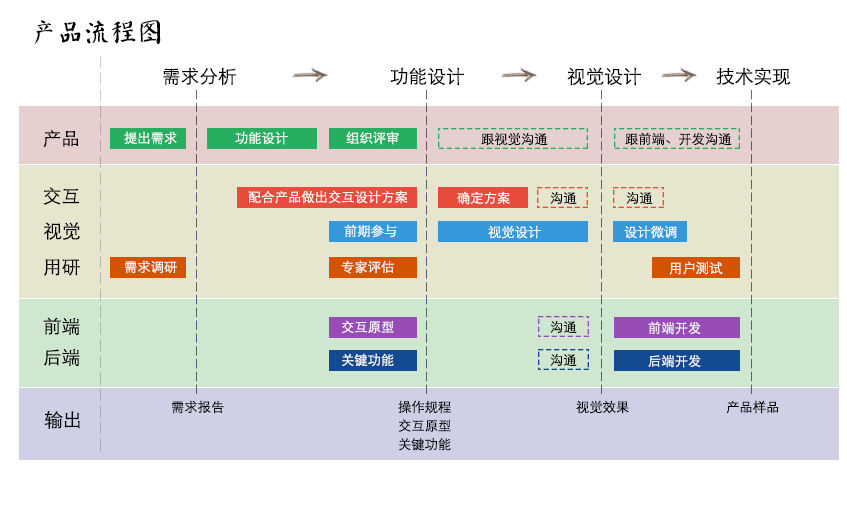
<style>
.page{position:relative;width:847px;height:513px;background:#ffffff}
.page>*{position:absolute;margin:0}
.t1{font:26.7px "øów·»îów©I";color:#000000;text-transform:uppercase}
.t2{font:18.7px "STXihei";color:#000000;text-transform:uppercase}
.t3{font:13.3px "STXihei";color:#ffffff;text-transform:uppercase}
.t4{font:13.3px "STXihei";color:#000000;text-transform:uppercase}
.t5{font:13.3px/18.7px "STXihei";color:#000000;text-transform:uppercase}
</style>
<div class="page">
<p class="t1" style="left:34px;top:20px;width:127px;height:25px">产品流程图</p>
<p class="t2" style="left:163px;top:67px;width:73px;height:18px">需求分析</p>
<p class="t2" style="left:390px;top:67px;width:74px;height:19px">功能设计</p>
<p class="t2" style="left:567px;top:67px;width:74px;height:19px">视觉设计</p>
<p class="t2" style="left:716px;top:67px;width:75px;height:19px">技术实现</p>
<p class="t2" style="left:43px;top:130px;width:35px;height:17px">产品</p>
<p class="t3" style="left:124px;top:131px;width:53px;height:14px">提出需求</p>
<p class="t3" style="left:235px;top:131px;width:53px;height:14px">功能设计</p>
<p class="t3" style="left:346px;top:131px;width:53px;height:14px">组织评审</p>
<p class="t4" style="left:481px;top:132px;width:67px;height:14px">跟视觉沟通</p>
<p class="t4" style="left:625px;top:132px;width:107px;height:14px">跟前端、开发沟通</p>
<p class="t2" style="left:43px;top:187px;width:36px;height:18px">交互</p>
<p class="t3" style="left:248px;top:190px;width:160px;height:14px">配合产品做出交互设计方案</p>
<p class="t3" style="left:457px;top:191px;width:53px;height:14px">确定方案</p>
<p class="t4" style="left:550px;top:192px;width:27px;height:12px">沟通</p>
<p class="t4" style="left:626px;top:192px;width:27px;height:12px">沟通</p>
<p class="t2" style="left:43px;top:222px;width:37px;height:18px">视觉</p>
<p class="t3" style="left:344px;top:224px;width:53px;height:14px">前期参与</p>
<p class="t3" style="left:488px;top:225px;width:53px;height:14px">视觉设计</p>
<p class="t3" style="left:624px;top:225px;width:53px;height:14px">设计微调</p>
<p class="t2" style="left:44px;top:259px;width:36px;height:17px">用研</p>
<p class="t3" style="left:125px;top:260px;width:52px;height:14px">需求调研</p>
<p class="t3" style="left:341px;top:260px;width:53px;height:14px">专家评估</p>
<p class="t3" style="left:669px;top:261px;width:54px;height:14px">用户测试</p>
<p class="t2" style="left:43px;top:317px;width:37px;height:18px">前端</p>
<p class="t3" style="left:341px;top:320px;width:53px;height:14px">交互原型</p>
<p class="t4" style="left:550px;top:321px;width:27px;height:12px">沟通</p>
<p class="t3" style="left:648px;top:321px;width:53px;height:14px">前端开发</p>
<p class="t2" style="left:43px;top:349px;width:37px;height:17px">后端</p>
<p class="t3" style="left:342px;top:353px;width:52px;height:14px">关键功能</p>
<p class="t4" style="left:550px;top:354px;width:27px;height:12px">沟通</p>
<p class="t3" style="left:648px;top:355px;width:53px;height:13px">后端开发</p>
<p class="t4" style="left:172px;top:400px;width:52px;height:14px">需求报告</p>
<p class="t5" style="left:398px;top:400px;width:53px;height:51px">操作规程<br>交互原型<br>关键功能</p>
<p class="t4" style="left:576px;top:400px;width:53px;height:14px">视觉效果</p>
<p class="t4" style="left:726px;top:400px;width:53px;height:14px">产品样品</p>
<p class="t2" style="left:44px;top:411px;width:36px;height:18px">输出</p>
</div>
